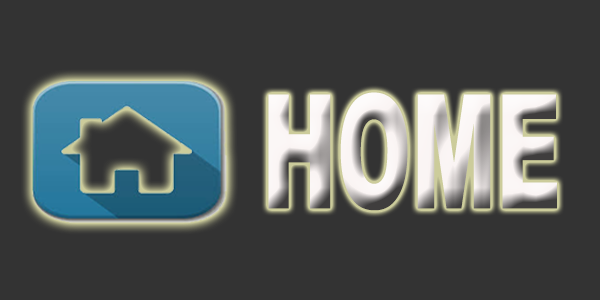
<style>
.page{position:relative;width:600px;height:300px;background:#333333}
.page>*{position:absolute;margin:0}
.t1{font:158.8px "Arial-Black";scale:0.56 1}
</style>
<div class="page">
<p class="t1" style="left:268px;top:92px;width:289px;height:119px">HOME</p>
</div>
